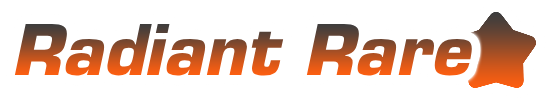
<style>
.page{position:relative;width:550px;height:100px;background:#ffffff}
.page>*{position:absolute;margin:0}
.t1{font:68px "Eurostile-BoldOblique"}
</style>
<div class="page">
<p class="t1" style="left:14px;top:23px;width:458px;height:53px">Radiant Rare</p>
</div>
